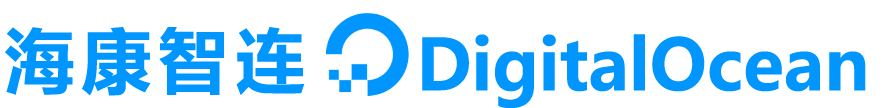
<style>
.page{position:relative;width:883px;height:108px;background:#ffffff}
.page>*{position:absolute;margin:0}
.t1{font:70px "MicrosoftYaHeiUI-Bold";letter-spacing:0.1em;color:#0096ff}
.t2{font:70px "MicrosoftYaHeiUI-Bold";color:#0096fe}
</style>
<div class="page">
<p class="t1" style="left:5px;top:27px;width:300px;height:69px">海康智连</p>
<p class="t2" style="left:422px;top:34px;width:444px;height:74px">DigitalOcean</p>
</div>
